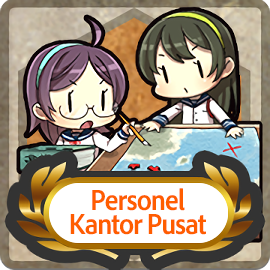
<style>
.page{position:relative;width:270px;height:270px}
.page>*{position:absolute;margin:0}
.t1{font:30px/24px "AdobeClean-Bold";letter-spacing:-0.04em;color:#ff5d00;scale:0.9 1}
</style>
<div class="page">
<p class="t1" style="left:70px;top:188px;width:136px;height:47px;text-align:center">Personel<br>Kantor Pusat</p>
</div>
